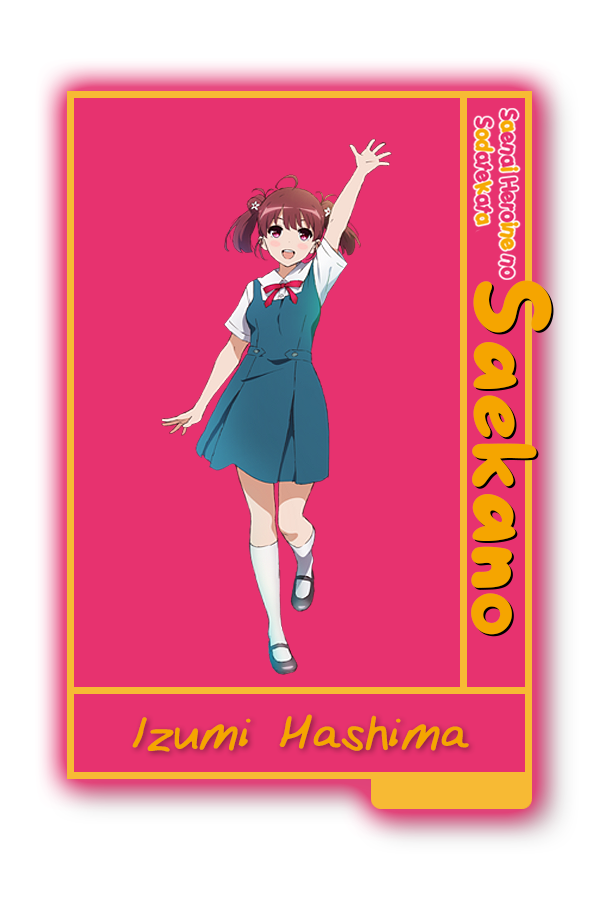
<style>
.page{position:relative;width:600px;height:900px;background:#e7326f}
.page>*{position:absolute;margin:0}
.t1{font:109.9px "Go-Mocha";color:#f5a500;scale:1.04 1}
.t2{font:56.9px "Girly_handwriting";color:#f5a500;scale:1.17 1}
</style>
<div class="page">
<p class="t1" style="left:471px;top:280px;width:81px;height:355px;rotate:91deg">Saekano</p>
<p class="t2" style="left:132px;top:714px;width:337px;height:38px">Izumi Hashima</p>
</div>
